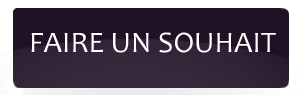
<style>
.page{position:relative;width:300px;height:95px;background:#211126}
.page>*{position:absolute;margin:0}
.t1{font:30px "Candara";color:#ffffff}
</style>
<div class="page">
<p class="t1" style="left:31px;top:32px;width:245px;height:21px">FAIRE UN SOUHAIT</p>
</div>
